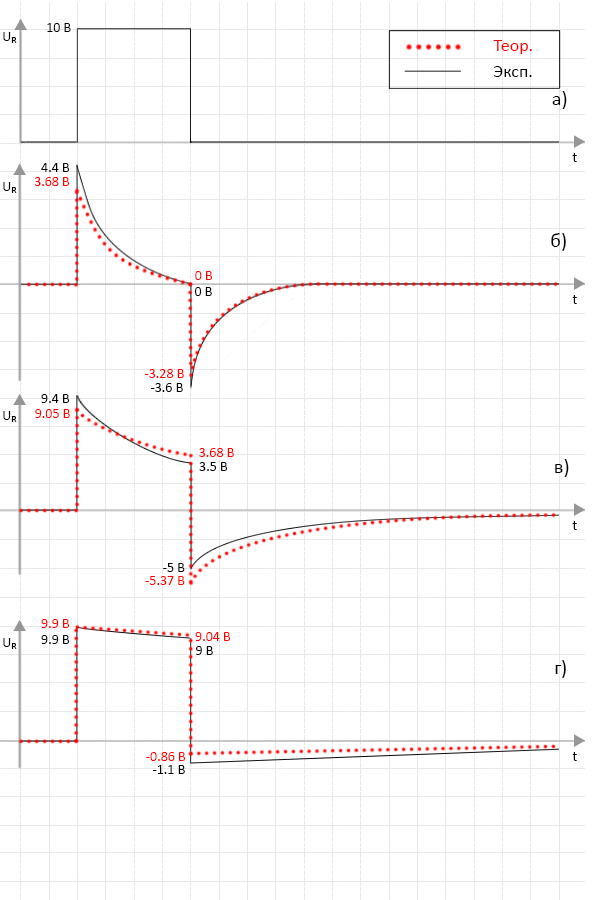
<style>
.page{position:relative;width:593px;height:900px;background:#ffffff}
.page>*{position:absolute;margin:0}
.t1{font:14px "Calibri";color:#000000}
.t2{font:10px "Calibri";color:#000000}
.t3{font:18px "Calibri";color:#ff0000}
.t4{font:18px "Calibri";color:#000000}
.t5{font:20px "Calibri";color:#000000}
.t6{font:14px "Calibri";color:#ff0000}
</style>
<div class="page">
<p class="t1" style="left:47px;top:23px;width:24px;height:9px">10 В</p>
<p class="t1" style="left:3px;top:32px;width:8px;height:9px">U</p>
<p class="t2" style="left:11px;top:37px;width:6px;height:6px">R</p>
<p class="t3" style="left:493px;top:40px;width:39px;height:14px">Теор.</p>
<p class="t4" style="left:493px;top:66px;width:39px;height:11px">Эксп.</p>
<p class="t5" style="left:552px;top:91px;width:15px;height:18px">а)</p>
<p class="t1" style="left:572px;top:153px;width:5px;height:9px">t</p>
<p class="t1" style="left:41px;top:163px;width:29px;height:9px">4.4 В</p>
<p class="t1" style="left:3px;top:182px;width:8px;height:9px">U</p>
<p class="t6" style="left:34px;top:177px;width:36px;height:9px">3.68 В</p>
<p class="t2" style="left:11px;top:187px;width:6px;height:6px">R</p>
<p class="t5" style="left:551px;top:233px;width:15px;height:18px">б)</p>
<p class="t6" style="left:195px;top:271px;width:18px;height:9px">0 В</p>
<p class="t1" style="left:195px;top:287px;width:17px;height:9px">0 В</p>
<p class="t1" style="left:572px;top:295px;width:5px;height:9px">t</p>
<p class="t6" style="left:144px;top:369px;width:40px;height:9px">-3.28 В</p>
<p class="t1" style="left:150px;top:383px;width:33px;height:9px">-3.6 В</p>
<p class="t1" style="left:41px;top:394px;width:29px;height:9px">9.4 В</p>
<p class="t1" style="left:3px;top:411px;width:8px;height:9px">U</p>
<p class="t6" style="left:35px;top:409px;width:35px;height:9px">9.05 В</p>
<p class="t2" style="left:11px;top:416px;width:6px;height:6px">R</p>
<p class="t6" style="left:199px;top:448px;width:35px;height:9px">3.68 В</p>
<p class="t1" style="left:199px;top:462px;width:29px;height:9px">3.5 В</p>
<p class="t5" style="left:555px;top:459px;width:14px;height:18px">в)</p>
<p class="t1" style="left:572px;top:521px;width:5px;height:9px">t</p>
<p class="t1" style="left:163px;top:563px;width:22px;height:9px">-5 В</p>
<p class="t6" style="left:145px;top:576px;width:40px;height:9px">-5.37 В</p>
<p class="t6" style="left:41px;top:619px;width:29px;height:9px">9.9 В</p>
<p class="t1" style="left:3px;top:638px;width:8px;height:9px">U</p>
<p class="t1" style="left:41px;top:635px;width:29px;height:9px">9.9 В</p>
<p class="t6" style="left:195px;top:632px;width:36px;height:9px">9.04 В</p>
<p class="t2" style="left:11px;top:643px;width:6px;height:6px">R</p>
<p class="t1" style="left:196px;top:646px;width:17px;height:9px">9 В</p>
<p class="t5" style="left:555px;top:660px;width:11px;height:18px">г)</p>
<p class="t6" style="left:146px;top:752px;width:40px;height:9px">-0.86 В</p>
<p class="t1" style="left:572px;top:752px;width:5px;height:9px">t</p>
<p class="t1" style="left:152px;top:765px;width:33px;height:9px">-1.1 В</p>
</div>
